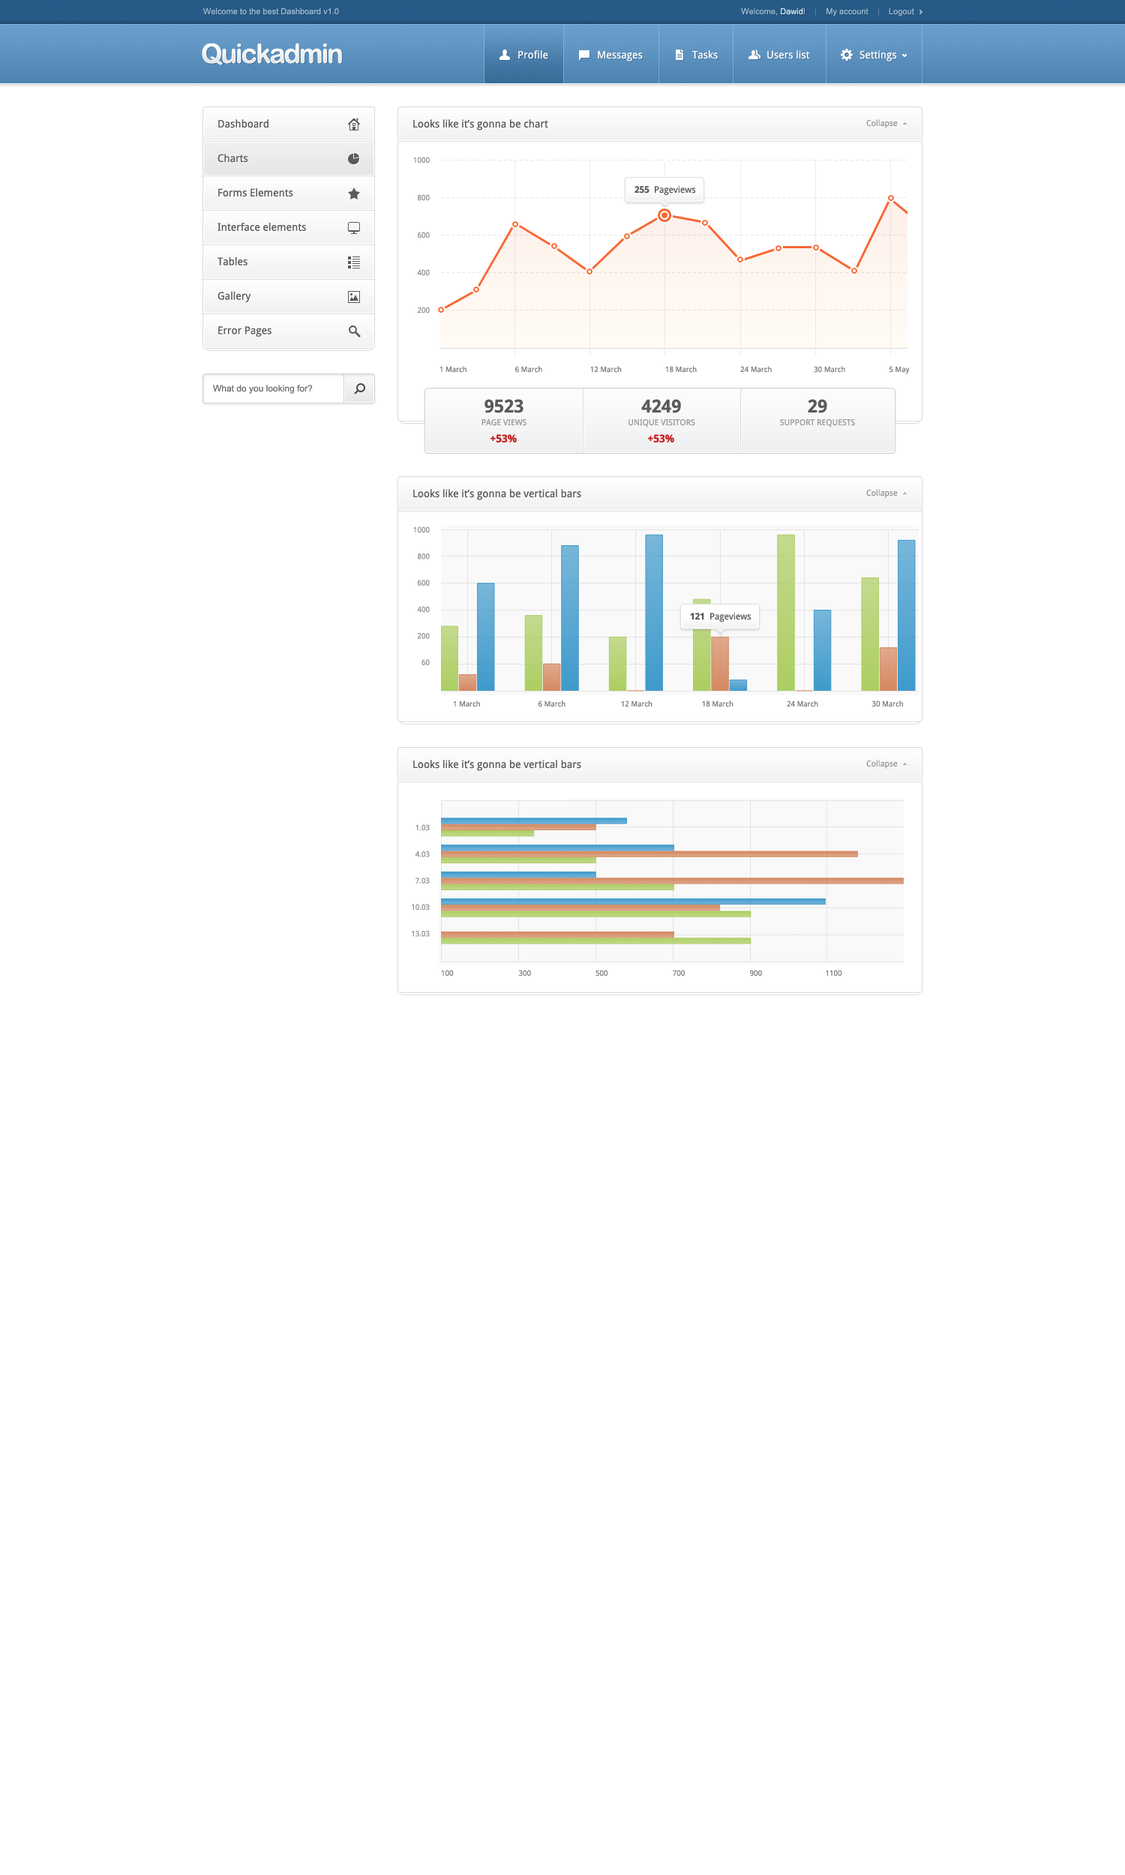
<style>
.page{position:relative;width:1125px;height:1875px;background:#ffffff}
.page>*{position:absolute;margin:0}
.t1{font:8.2px "ArialMT";color:#9ebdd4}
.t2{font:8.2px "ArialMT";color:#d7e7f2}
.t3{font:27px "ArialRoundedMTBold";letter-spacing:-0.06em;color:#ffffff}
.t4{font:10.5px "DroidSans";color:#ffffff}
.t5{font:10.5px "DroidSans";color:#5a5a5a}
.t6{font:8.2px "DroidSans";color:#999999}
.t7{font:7.5px "DroidSans";color:#8f8f8f}
.t8{font:9px "DroidSans";color:#5a5a5a}
.t9{font:9px "DroidSans-Bold";color:#5a5a5a}
.t10{font:7.5px "DroidSans";color:#7c7c7c}
.t11{font:9px "ArialMT";color:#6f6f6f}
.t12{font:18px "DroidSans-Bold";color:#5a5a5a}
.t13{font:8.2px "DroidSans";color:#989898}
.t14{font:10.5px "DroidSans-Bold";color:#c61e1e}
</style>
<div class="page">
<p class="t1" style="left:203px;top:8px;width:136px;height:7px">Welcome to the best Dashboard v1.0</p>
<p class="t1" style="left:741px;top:8px;width:173px;height:8px">Welcome, <span class="t2">Dawid</span>!         My account         Logout</p>
<p class="t3" style="left:202px;top:43px;width:140px;height:22px">Quickadmin</p>
<p class="t4" style="left:518px;top:50px;width:30px;height:9px">Profile</p>
<p class="t4" style="left:598px;top:51px;width:45px;height:11px">Messages</p>
<p class="t4" style="left:692px;top:50px;width:26px;height:9px">Tasks</p>
<p class="t4" style="left:767px;top:50px;width:43px;height:9px">Users list</p>
<p class="t4" style="left:860px;top:50px;width:37px;height:12px">Settings</p>
<p class="t5" style="left:218px;top:119px;width:88px;height:218px;text-align:justify">Dashboard<br>Charts<br>Forms Elements<br>Interface elements<br>Tables<br>Gallery<br>Error Pages</p>
<p class="t5" style="left:413px;top:119px;width:135px;height:11px">Looks like it’s gonna be chart</p>
<p class="t6" style="left:866px;top:119px;width:32px;height:9px">Collapse</p>
<p class="t7" style="left:413px;top:157px;width:17px;height:157px;text-align:right">1000<br>800<br>600<br>400<br>200</p>
<p class="t8" style="left:634px;top:186px;width:62px;height:9px"><span class="t9">255  </span>Pageviews</p>
<p class="t10" style="left:440px;top:366px;width:470px;height:8px">1 March            6 March          12 March       18 March    24 March             30 March              5 May</p>
<p class="t11" style="left:213px;top:385px;width:100px;height:9px">What do you looking for?</p>
<p class="t12" style="left:484px;top:399px;width:40px;height:14px">9523</p>
<p class="t12" style="left:641px;top:399px;width:40px;height:14px">4249</p>
<p class="t12" style="left:808px;top:399px;width:19px;height:14px">29</p>
<p class="t13" style="left:482px;top:419px;width:44px;height:7px">PAGE VIEWS</p>
<p class="t13" style="left:628px;top:419px;width:67px;height:9px">UNIQUE VISITORS</p>
<p class="t13" style="left:780px;top:419px;width:75px;height:9px">SUPPORT REQUESTS</p>
<p class="t14" style="left:490px;top:434px;width:27px;height:8px">+53%</p>
<p class="t14" style="left:648px;top:434px;width:26px;height:8px">+53%</p>
<p class="t5" style="left:413px;top:489px;width:168px;height:11px">Looks like it’s gonna be vertical bars</p>
<p class="t6" style="left:866px;top:489px;width:32px;height:9px">Collapse</p>
<p class="t7" style="left:413px;top:526px;width:17px;height:139px;text-align:right">1000<br>800<br>600<br>400<br>200<br>60</p>
<p class="t8" style="left:690px;top:613px;width:62px;height:9px"><span class="t9">121  </span>Pageviews</p>
<p class="t10" style="left:453px;top:700px;width:450px;height:7px">1 March                 6 March     12 March     18 March       24 March                      30 March</p>
<p class="t5" style="left:413px;top:760px;width:168px;height:11px">Looks like it’s gonna be vertical bars</p>
<p class="t6" style="left:866px;top:760px;width:32px;height:9px">Collapse</p>
<p class="t7" style="left:412px;top:824px;width:18px;height:113px;text-align:right">1.03<br>4.03<br>7.03<br>10.03<br>13.03</p>
<p class="t10" style="left:441px;top:970px;width:401px;height:6px">100                           300            500          700        900                                1100</p>
</div>
